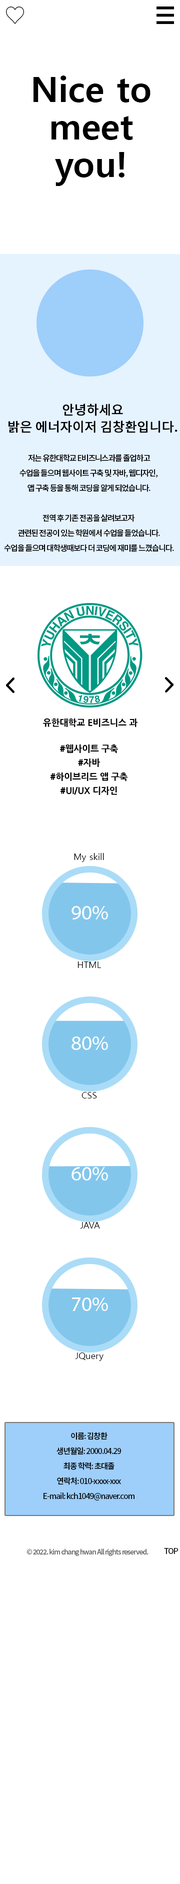
<style>
.page{position:relative;width:180px;height:1884px;background:#ffffff}
.page>*{position:absolute;margin:0}
.t1{font:35px/37.5px "MalgunGothicBold";color:#000000}
.t2{font:13px/17px "NotoSansKR-Regular";color:#000000;font-weight:bold}
.t3{font:8px/15px "NotoSansKR-Medium";letter-spacing:-0.08em;color:#000000}
.t4{font:9.1px "NanumGothicExtraBold";color:#000000}
.t5{font:9px/14px "NanumGothicExtraBold";color:#000000}
.t6{font:9px "MalgunGothic";color:#000000}
.t7{font:7px "NotoSansKR-Medium";letter-spacing:-0.08em;color:#666666}
.t8{font:8px "NotoSansKR-Medium";letter-spacing:-0.08em;color:#000000}
</style>
<div class="page">
<p class="t1" style="left:34px;top:76px;width:116px;height:110px;text-align:center">Nice to<br>meet<br>you!</p>
<p class="t2" style="left:8px;top:404px;width:170px;height:29px;text-align:center">안녕하세요<br>밝은 에너자이저 김창환입니다.</p>
<p class="t3" style="left:4px;top:454px;width:170px;height:98px;text-align:center">저는 유한대학교 E비즈니스과를 졸업하고<br>수업을 들으며 웹사이트 구축 및 자바, 웹디자인, <br>앱 구축 등을 통해 코딩을 알게 되었습니다.<br><br>전역 후 기존 전공을 살려보고자 <br>관련된 전공이 있는 학원에서 수업을 들었습니다.<br>수업을 들으며 대학생때보다 더 코딩에 재미를 느꼈습니다.</p>
<p class="t4" style="left:43px;top:718px;width:95px;height:9px">유한대학교 E비즈니스 과</p>
<p class="t5" style="left:50px;top:744px;width:78px;height:51px;text-align:center">#웹사이트 구축<br>#자바<br>#하이브리드 앱 구축<br>#UI/UX 디자인</p>
<p class="t6" style="left:74px;top:853px;width:30px;height:9px">My skill</p>
<p class="t6" style="left:78px;top:962px;width:23px;height:6px">HTML</p>
<p class="t6" style="left:82px;top:1092px;width:15px;height:6px">CSS</p>
<p class="t6" style="left:80px;top:1222px;width:20px;height:6px">JAVA</p>
<p class="t6" style="left:75px;top:1352px;width:29px;height:9px">JQuery</p>
<p class="t3" style="left:44px;top:1432px;width:90px;height:68px;text-align:center">이름: 김창환<br>생년월일: 2000.04.29<br>최종 학력: 초대졸<br>연락처: 010-xxxx-xxx<br>E-mail: kch1049@naver.com</p>
<p class="t7" style="left:26px;top:1548px;width:122px;height:8px">© 2022. kim chang hwan All rights reserved.</p>
<p class="t8" style="left:164px;top:1548px;width:14px;height:6px">TOP</p>
</div>
